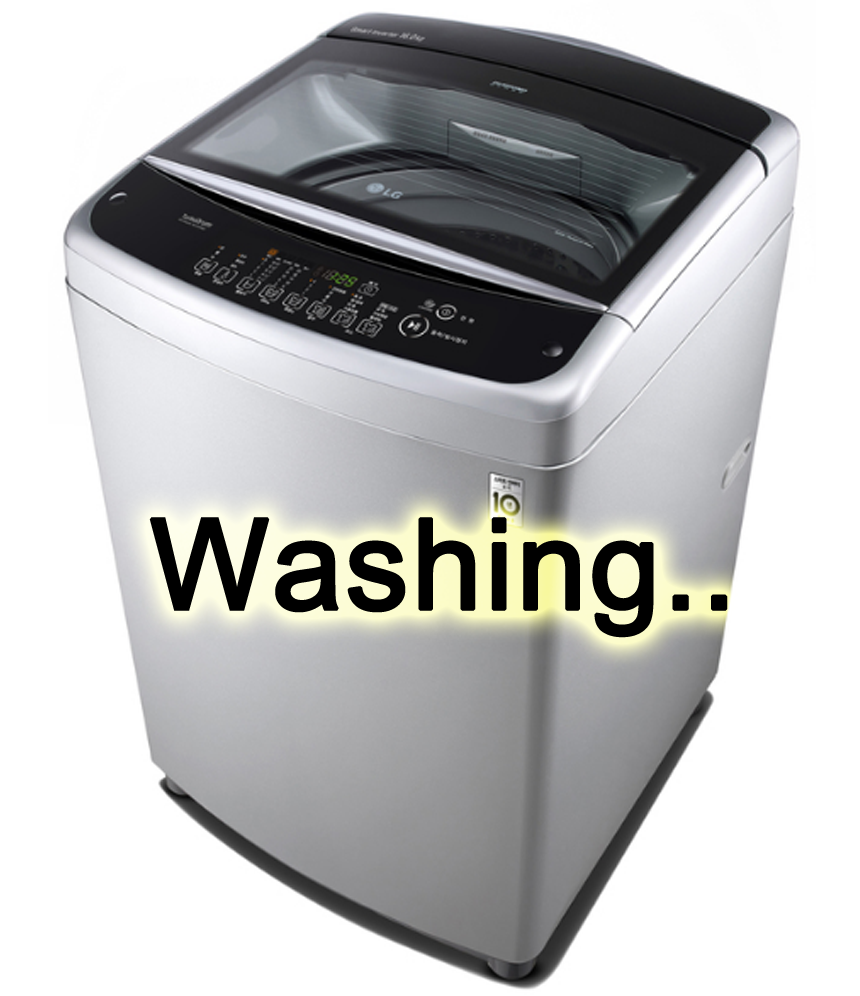
<style>
.page{position:relative;width:860px;height:996px;background:#ffffff}
.page>*{position:absolute;margin:0}
.t1{font:125.8px "ArialUnicodeMS";color:#000000;font-weight:bold}
</style>
<div class="page">
<p class="t1" style="left:149px;top:517px;width:579px;height:121px">Washing..</p>
</div>
